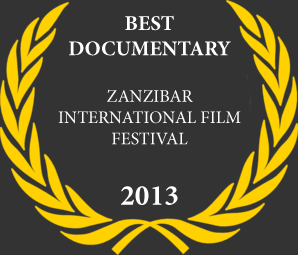
<style>
.page{position:relative;width:298px;height:255px;background:#333333}
.page>*{position:absolute;margin:0}
.t1{font:17.6px "MinionPro-Regular";color:#ffffff;text-transform:uppercase}
.t2{font:21.2px "MinionPro-Bold";color:#ffffff;text-transform:uppercase}
.t3{font:29.4px "MinionPro-Bold";color:#ffffff;text-transform:uppercase}
</style>
<div class="page">
<p class="t1" style="left:58px;top:15px;width:183px;height:190px;text-align:center"><span class="t2">Best Documentary<br><br></span>Zanzibar International Film Festival<br><br><span class="t3">2013</span></p>
</div>
